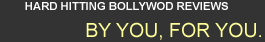
<style>
.page{position:relative;width:265px;height:42px;background:#333333}
.page>*{position:absolute;margin:0}
.t1{font:11.3px "Arial-BoldMT";color:#ffffff;text-transform:uppercase}
.t2{font:19.5px "ArialMT";color:#feff98;text-transform:uppercase}
</style>
<div class="page">
<p class="t1" style="left:25px;top:2px;width:203px;height:8px">hard hitting bollywod reviews</p>
<p class="t2" style="left:86px;top:22px;width:175px;height:18px">by you, for you.</p>
</div>
